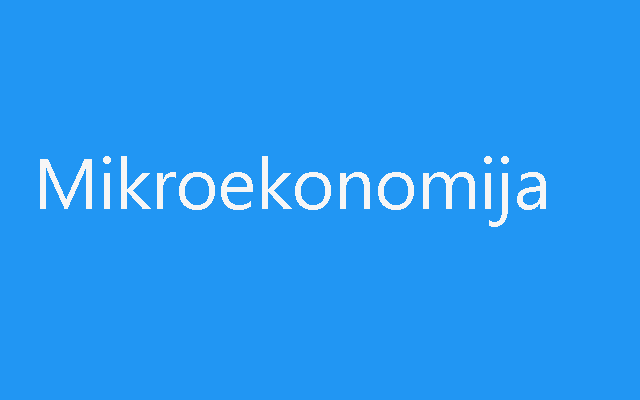
<style>
.page{position:relative;width:640px;height:400px;background:#2196f3}
.page>*{position:absolute;margin:0}
.t1{font:72px "SegoeUISymbol";color:#f6f6f6}
</style>
<div class="page">
<p class="t1" style="left:40px;top:156px;width:506px;height:71px">Mikroekonomija</p>
</div>
